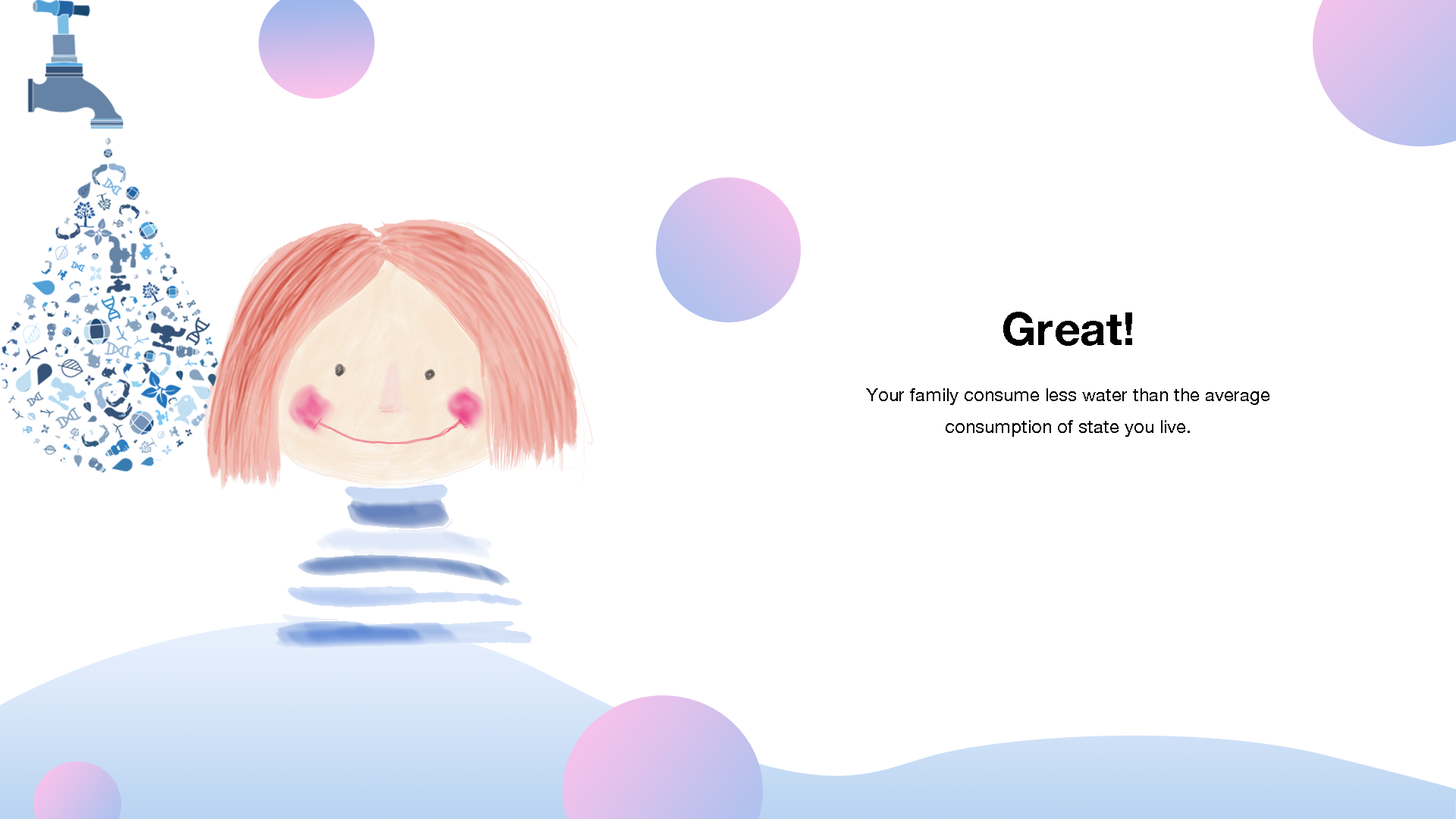
<style>
.page{position:relative;width:1456px;height:819px;background:#ffffff}
.page>*{position:absolute;margin:0}
.t1{font:18.2px "HelveticaNeue";color:#000000}
.t2{font:45.5px "HelveticaNeue-Bold";color:#000000}
</style>
<div class="page">
<p class="t1" style="left:866px;top:312px;width:403px;height:125px;text-align:center"><span class="t2">Great! <br></span>Your family consume less water than the average consumption of state you live.</p>
</div>
